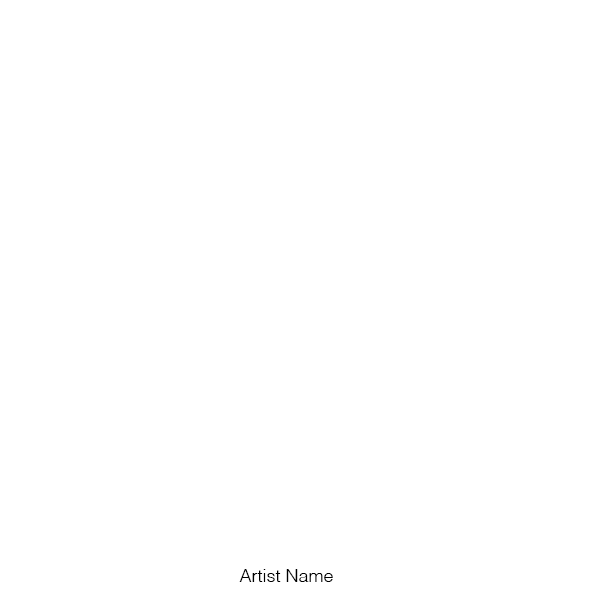
<style>
.page{position:relative;width:600px;height:600px;background:#ffffff}
.page>*{position:absolute;margin:0}
.t1{font:18px "Helvetica-Light";color:#000000}
</style>
<div class="page">
<p class="t1" style="left:239px;top:569px;width:94px;height:13px">Artist Name</p>
</div>
